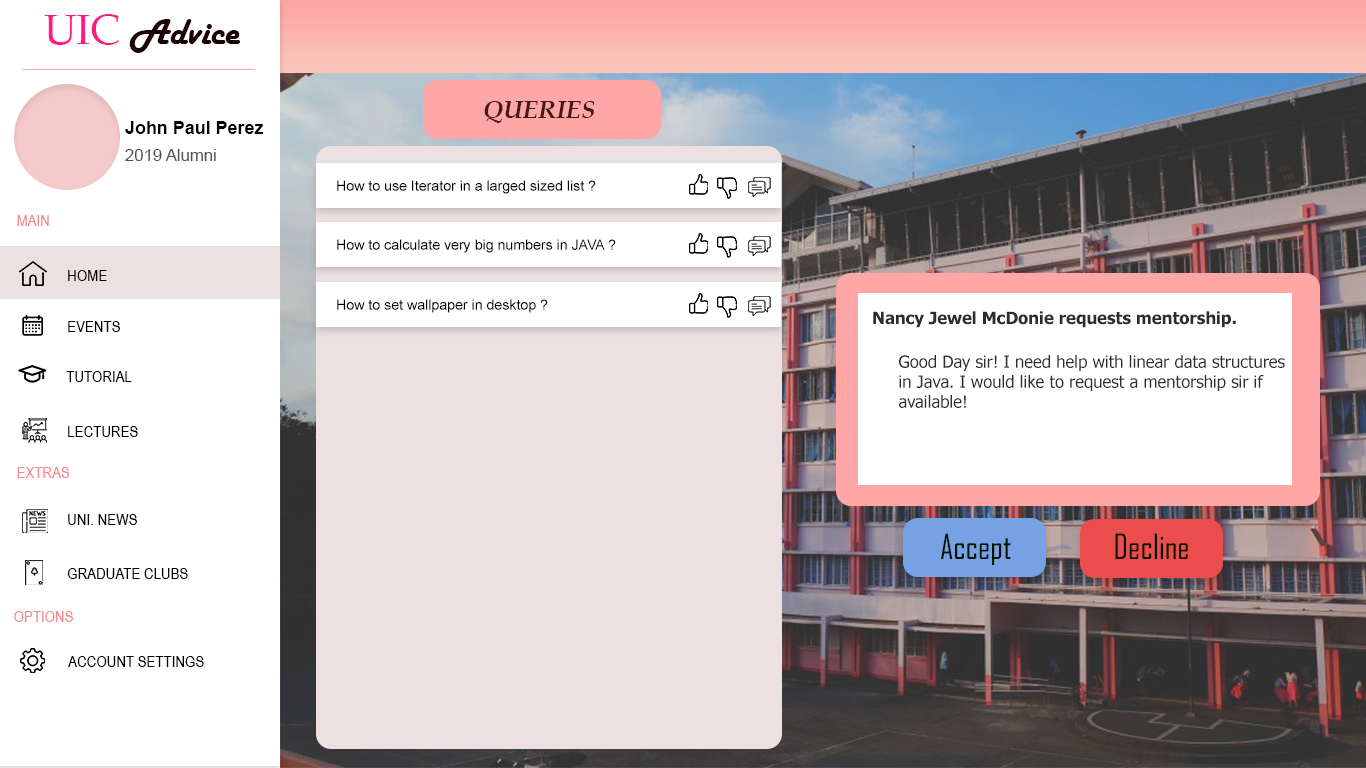
<style>
.page{position:relative;width:1366px;height:768px;background:#ffffff}
.page>*{position:absolute;margin:0}
.t1{font:37.5px "HarlowSolid";color:#1a0202}
.t2{font:41.7px "BookAntiqua";color:#ff1b86}
.t3{font:25px "BookAntiqua-BoldItalic";color:#451717}
.t4{font:17.9px "Arial-BoldMT";color:#000000}
.t5{font:16.7px "ArialMT";color:#555151}
.t6{font:14.2px "ArialMT";color:#000000}
.t7{font:16.2px "ArialNarrow";color:#f58a8a}
.t8{font:16.2px "ArialNarrow";color:#000000}
.t9{font:16.7px "Tahoma-Bold";color:#2c2c36}
.t10{font:16.7px "Tahoma";color:#2c2c36}
.t11{font:33.3px "AgencyFB-Reg";color:#061201}
</style>
<div class="page">
<p class="t1" style="left:44px;top:14px;width:197px;height:39px"><span class="t2">UIC </span>Advice</p>
<p class="t3" style="left:484px;top:101px;width:111px;height:22px">QUERIES</p>
<p class="t4" style="left:125px;top:121px;width:139px;height:13px">John Paul Perez</p>
<p class="t5" style="left:125px;top:149px;width:91px;height:12px">2019 Alumni</p>
<p class="t6" style="left:337px;top:180px;width:259px;height:14px">How to use Iterator in a larged sized list ?</p>
<p class="t7" style="left:17px;top:215px;width:32px;height:11px">MAIN</p>
<p class="t6" style="left:337px;top:239px;width:279px;height:14px">How to calculate very big numbers in JAVA ?</p>
<p class="t8" style="left:68px;top:270px;width:39px;height:11px">HOME</p>
<p class="t6" style="left:337px;top:299px;width:211px;height:14px">How to set wallpaper in desktop ?</p>
<p class="t9" style="left:873px;top:311px;width:363px;height:17px">Nancy Jewel McDonie requests mentorship.</p>
<p class="t8" style="left:68px;top:321px;width:52px;height:11px">EVENTS</p>
<p class="t10" style="left:899px;top:355px;width:386px;height:53px">Good Day sir! I need help with linear data structures<br>in Java. I would like to request a mentorship sir if <br>available!</p>
<p class="t8" style="left:66px;top:371px;width:66px;height:11px">TUTORIAL</p>
<p class="t8" style="left:68px;top:426px;width:70px;height:11px">LECTURES</p>
<p class="t7" style="left:17px;top:467px;width:53px;height:11px">EXTRAS</p>
<p class="t8" style="left:68px;top:514px;width:69px;height:11px">UNI. NEWS</p>
<p class="t11" style="left:941px;top:533px;width:70px;height:32px">Accept</p>
<p class="t11" style="left:1115px;top:533px;width:73px;height:26px">Decline</p>
<p class="t8" style="left:67px;top:568px;width:121px;height:11px">GRADUATE CLUBS</p>
<p class="t7" style="left:14px;top:611px;width:59px;height:11px">OPTIONS</p>
<p class="t8" style="left:68px;top:656px;width:136px;height:11px">ACCOUNT SETTINGS</p>
</div>
